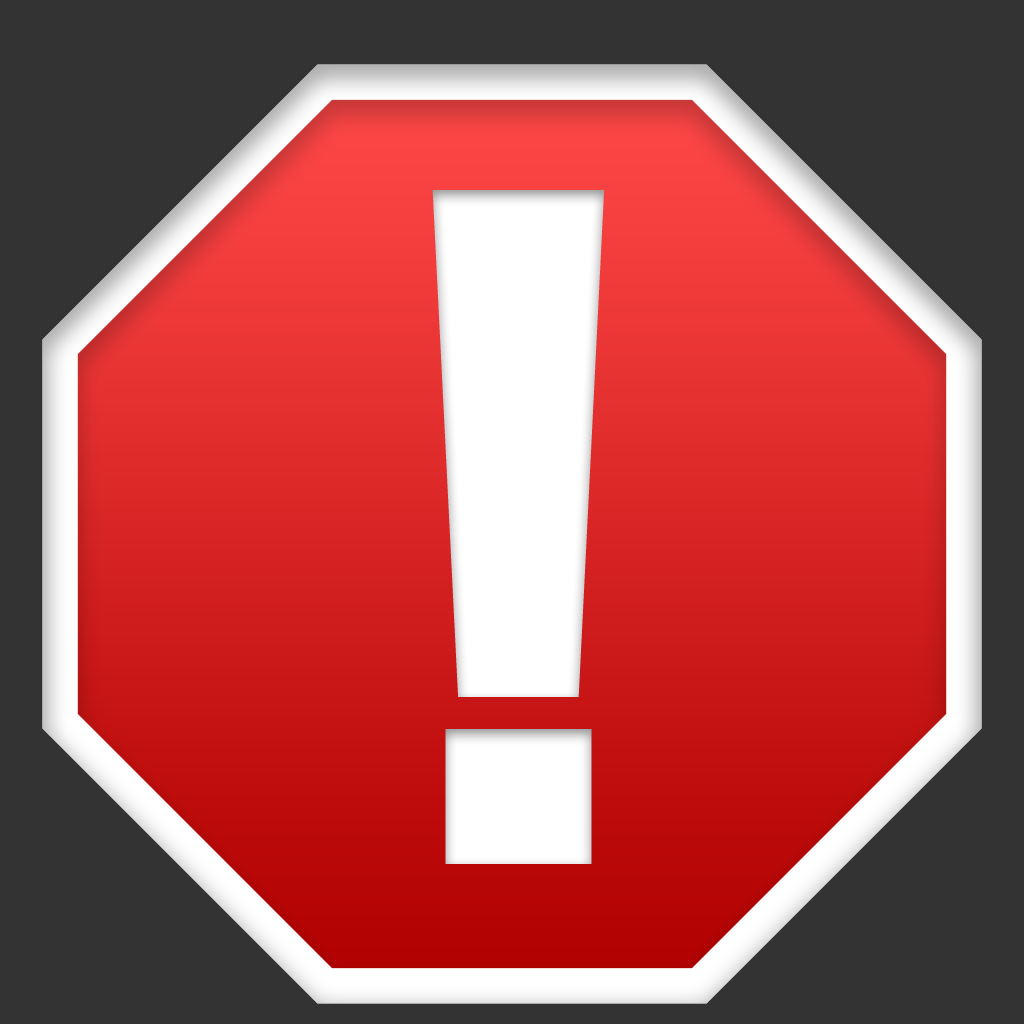
<style>
.page{position:relative;width:1024px;height:1024px;background:#333333}
.page>*{position:absolute;margin:0}
.t1{font:852.6px "Impact";color:#ffffff;scale:0.93 1}
</style>
<div class="page">
<p class="t1" style="left:432px;top:190px;width:173px;height:674px">!</p>
</div>
